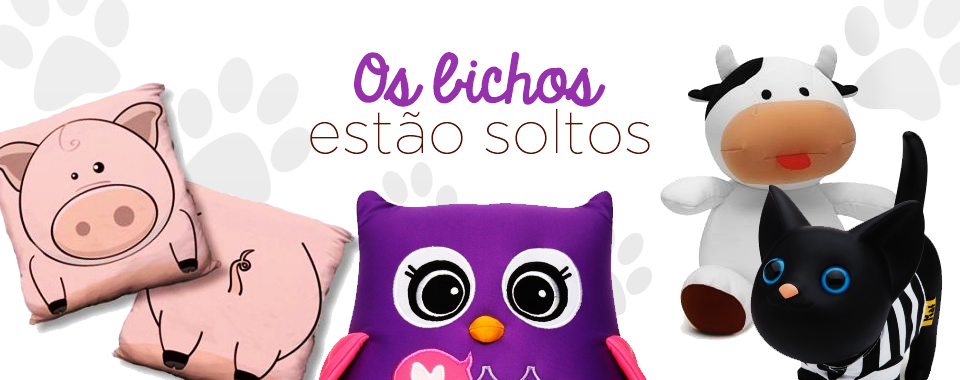
<style>
.page{position:relative;width:960px;height:380px;background:#ffffff}
.page>*{position:absolute;margin:0}
.t1{font:60px "KGAlwaysAGoodTime";color:#9444a5}
.t2{font:60px "GothamHTF-Thin";color:#612412}
</style>
<div class="page">
<p class="t1" style="left:354px;top:51px;width:252px;height:56px">Os bichos</p>
<p class="t2" style="left:310px;top:108px;width:340px;height:47px">estão soltos</p>
</div>
